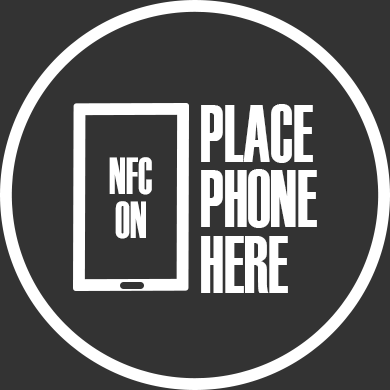
<style>
.page{position:relative;width:390px;height:390px;background:#333333}
.page>*{position:absolute;margin:0}
.t1{font:82.1px/65.7px "Haettenschweiler";color:#ffffff;scale:0.75 1}
.t2{font:52.1px/43.3px "Haettenschweiler";color:#ffffff;scale:0.75 1}
</style>
<div class="page">
<p class="t1" style="left:201px;top:104px;width:116px;height:189px">PLACE<br>PHONE<br>HERE</p>
<p class="t2" style="left:109px;top:157px;width:43px;height:82px;text-align:center">NFC<br>ON</p>
</div>
